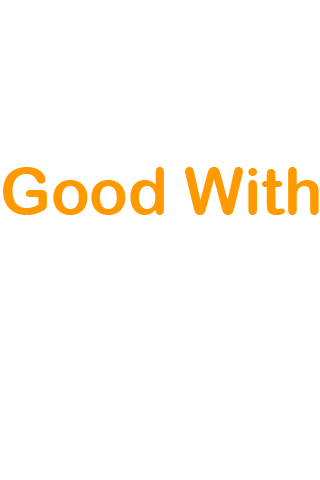
<style>
.page{position:relative;width:320px;height:480px;background:#ffffff}
.page>*{position:absolute;margin:0}
.t1{font:63.9px "ArialRoundedMTBold";color:#ff9900}
</style>
<div class="page">
<p class="t1" style="left:3px;top:167px;width:316px;height:48px">Good With</p>
</div>
